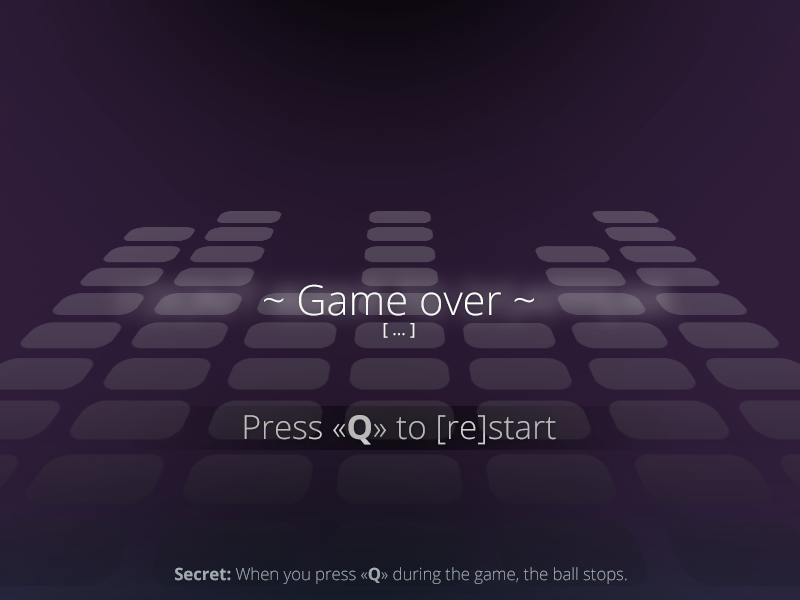
<style>
.page{position:relative;width:800px;height:600px}
.page>*{position:absolute;margin:0}
.t1{font:41.7px "OpenSans-Light";color:#ffffff}
.t2{font:16.7px "OpenSans";color:#ffffff}
.t3{font:33.3px "OpenSans-Light";color:#bababb}
.t4{font:33.3px "OpenSans-Bold";color:#bababb}
.t5{font:16.7px "OpenSans-Light";color:#a3a9b0}
.t6{font:16.7px "OpenSans-Bold";color:#a3a9b0}
</style>
<div class="page">
<p class="t1" style="left:264px;top:284px;width:270px;height:54px;text-align:center">~ Game over ~<br><span class="t2">[ ... ]</span></p>
<p class="t3" style="left:244px;top:415px;width:312px;height:30px">Press «<span class="t4">Q</span>» to [re]start</p>
<p class="t5" style="left:175px;top:567px;width:452px;height:17px"><span class="t6">Secret:</span> When you press «<span class="t6">Q</span>» during the game, the ball stops.</p>
</div>
